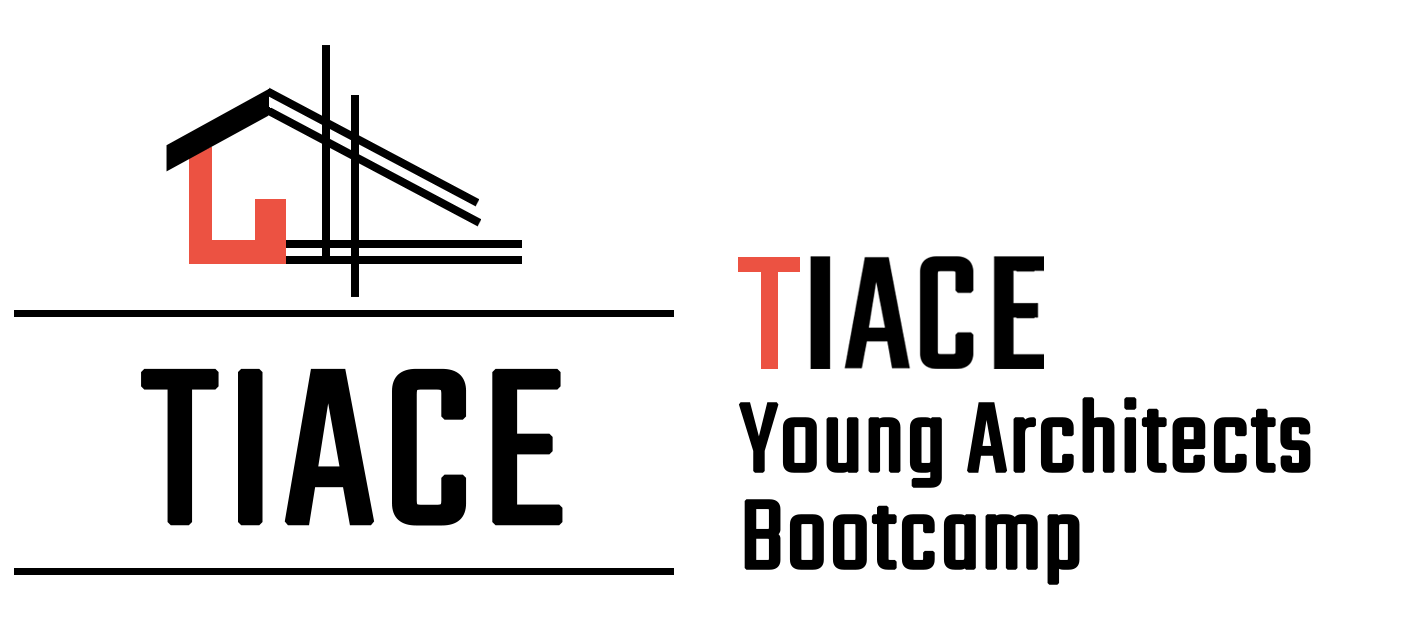
<style>
.page{position:relative;width:1420px;height:625px;background:#ffffff}
.page>*{position:absolute;margin:0}
.t1{font:241.3px "Teko-Light";color:#000000;font-weight:bold;scale:1.1 1}
.t2{font:106.2px "Teko-Light";color:#000000;font-weight:bold;scale:1.1 1}
</style>
<div class="page">
<p class="t1" style="left:141px;top:368px;width:422px;height:158px">TIACE</p>
<p class="t2" style="left:738px;top:397px;width:573px;height:91px">Young Architects</p>
<p class="t2" style="left:744px;top:499px;width:336px;height:86px">Bootcamp</p>
</div>
